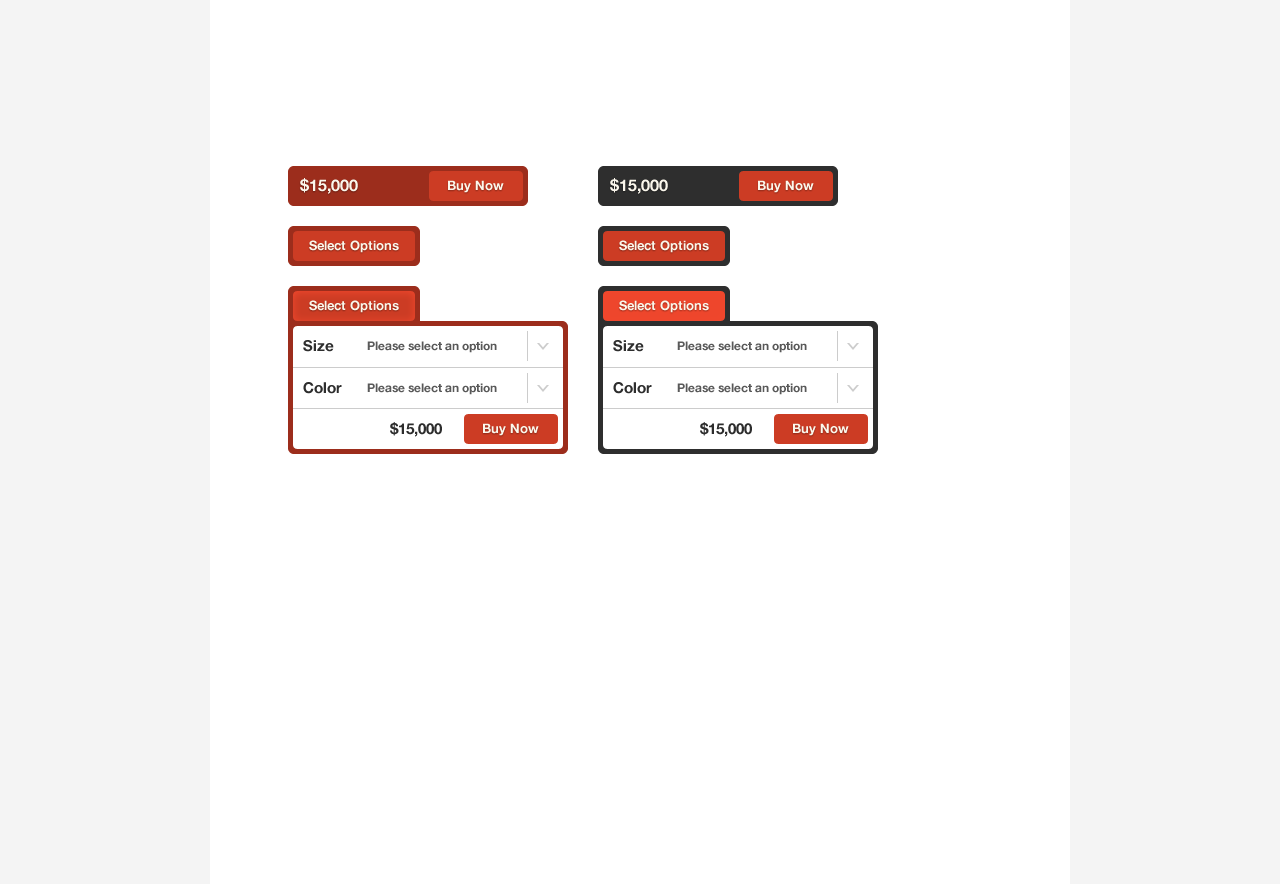
<style>
.page{position:relative;width:1280px;height:884px;background:#ffffff}
.page>*{position:absolute;margin:0}
.t1{font:16px "HelveticaNeue-Bold";color:#fbf7ec}
.t2{font:13px "HelveticaNeue-Bold";color:#fbf7ec}
.t3{font:13px "HelveticaNeue-Bold";color:#faf7eb}
.t4{font:15px "HelveticaNeue-Bold";color:#2e2e2e}
.t5{font:12px "HelveticaNeue-Bold";color:#595959}
.t6{font:15px "HelveticaNeue-Bold";color:#2d2d2d}
</style>
<div class="page">
<p class="t1" style="left:300px;top:178px;width:58px;height:16px">$15,000</p>
<p class="t2" style="left:448px;top:180px;width:56px;height:13px">Buy Now</p>
<p class="t1" style="left:610px;top:178px;width:58px;height:16px">$15,000</p>
<p class="t2" style="left:758px;top:180px;width:56px;height:13px">Buy Now</p>
<p class="t3" style="left:309px;top:240px;width:90px;height:13px">Select Options</p>
<p class="t3" style="left:619px;top:240px;width:90px;height:13px">Select Options</p>
<p class="t3" style="left:309px;top:300px;width:90px;height:13px">Select Options</p>
<p class="t3" style="left:619px;top:300px;width:90px;height:13px">Select Options</p>
<p class="t4" style="left:303px;top:340px;width:31px;height:12px">Size</p>
<p class="t5" style="left:367px;top:341px;width:130px;height:12px">Please select an option</p>
<p class="t4" style="left:613px;top:340px;width:31px;height:12px">Size</p>
<p class="t5" style="left:677px;top:341px;width:130px;height:12px">Please select an option</p>
<p class="t6" style="left:303px;top:382px;width:39px;height:12px">Color</p>
<p class="t5" style="left:367px;top:383px;width:130px;height:12px">Please select an option</p>
<p class="t6" style="left:613px;top:382px;width:39px;height:12px">Color</p>
<p class="t5" style="left:677px;top:383px;width:130px;height:12px">Please select an option</p>
<p class="t6" style="left:390px;top:422px;width:52px;height:15px">$15,000</p>
<p class="t2" style="left:483px;top:423px;width:56px;height:13px">Buy Now</p>
<p class="t6" style="left:700px;top:422px;width:52px;height:15px">$15,000</p>
<p class="t2" style="left:793px;top:423px;width:56px;height:13px">Buy Now</p>
</div>
